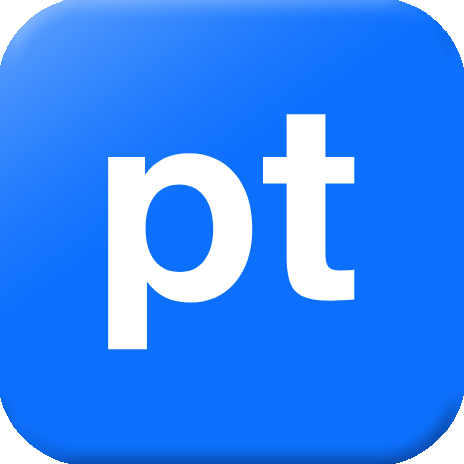
<style>
.page{position:relative;width:464px;height:464px;background:#0d70fd}
.page>*{position:absolute;margin:0}
.t1{font:275px "HelveticaNeue-Bold";color:#ffffff}
</style>
<div class="page">
<p class="t1" style="left:108px;top:114px;width:247px;height:236px">pt</p>
</div>
